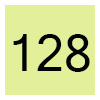
<style>
.page{position:relative;width:100px;height:100px;background:#e4ef9a}
.page>*{position:absolute;margin:0}
.t1{font:50px "MicrosoftSansSerif";color:#000407}
</style>
<div class="page">
<p class="t1" style="left:13px;top:34px;width:77px;height:38px">128</p>
</div>
